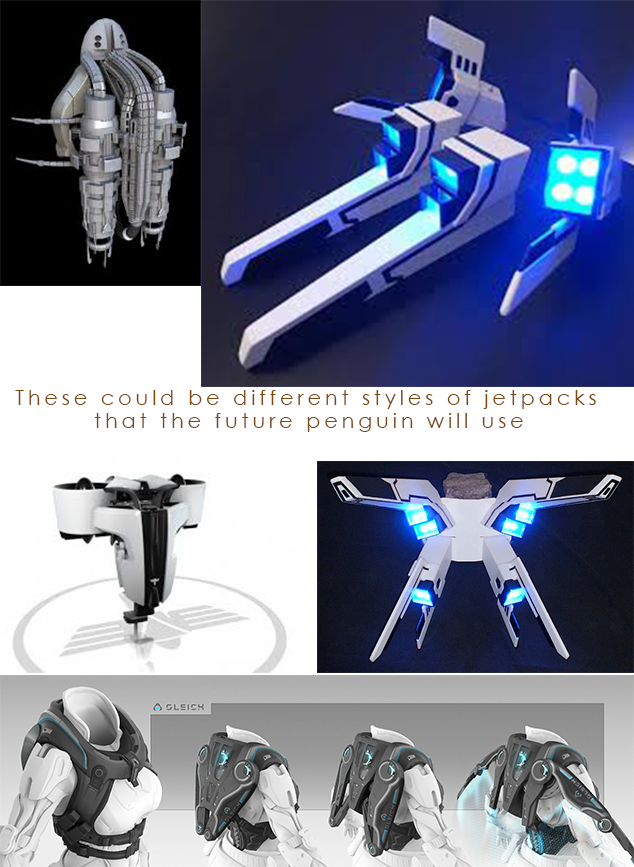
<style>
.page{position:relative;width:634px;height:867px}
.page>*{position:absolute;margin:0}
.t1{font:21px "CenturyGothic";letter-spacing:0.18em;color:#7d4814}
</style>
<div class="page">
<p class="t1" style="left:15px;top:390px;width:581px;height:19px">These could be different styles of jetpacks</p>
<p class="t1" style="left:94px;top:413px;width:429px;height:19px">that the future penguin will use</p>
</div>
